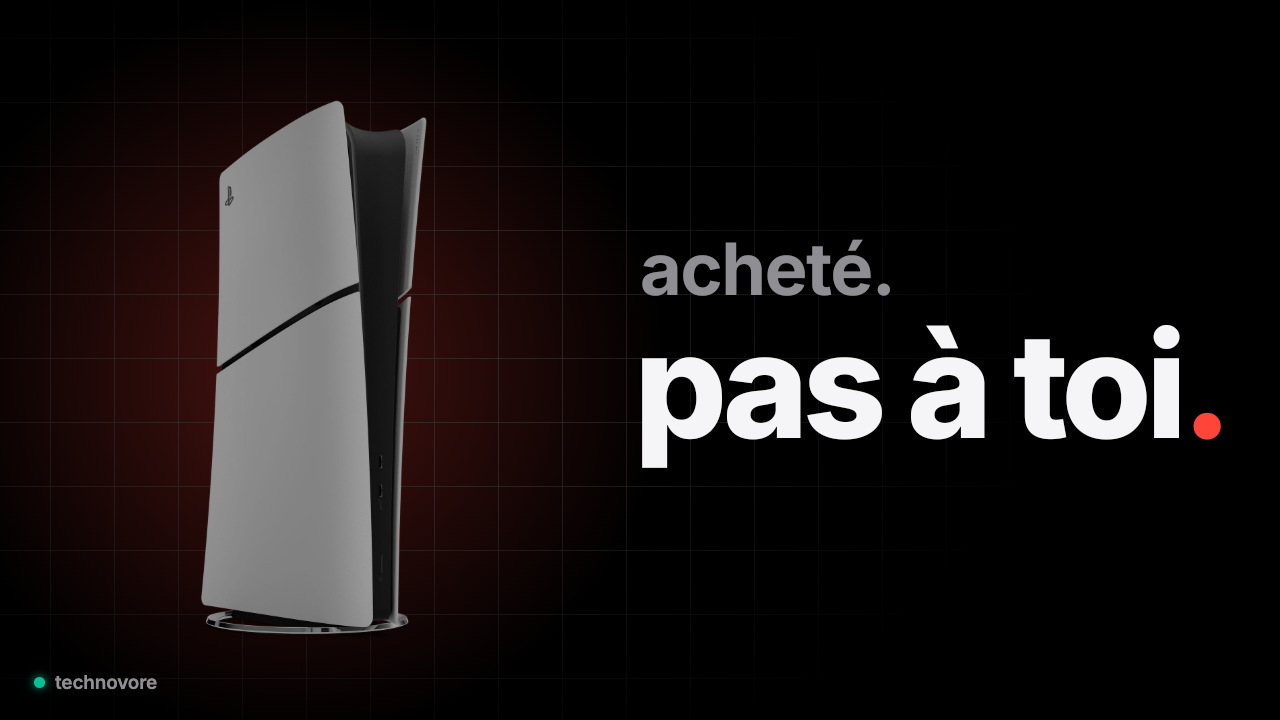
<style>
.page{position:relative;width:1280px;height:720px;background:#000000}
.page>*{position:absolute;margin:0}
.t1{font:72px "Inter-Bold";letter-spacing:-0.02em;color:#8e8e93}
.t2{font:146px "Inter-ExtraBold";letter-spacing:-0.04em;color:#f5f5f7}
.t3{font:146px "Inter-ExtraBold";letter-spacing:-0.04em;color:#ff453a}
</style>
<div class="page">
<p class="t1" style="left:641px;top:239px;width:250px;height:58px">acheté.</p>
<p class="t2" style="left:641px;top:325px;width:581px;height:144px">pas à toi<span class="t3">.</span></p>
</div>
